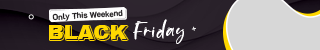
<style>
.page{position:relative;width:320px;height:50px;background:#d7d7d7}
.page>*{position:absolute;margin:0}
.t1{font:8.2px "K2D-SemiBold";color:#1d1a1c}
.t2{font:20.8px "ArchivoBlack-Regular";color:#ffd800}
.t3{font:25.5px "Sand-Beach";letter-spacing:0.055em;color:#ffffff}
</style>
<div class="page">
<p class="t1" style="left:52px;top:9px;width:71px;height:12px;rotate:-3deg">Only This Weekend</p>
<p class="t2" style="left:49px;top:25px;width:78px;height:14px">BLACK</p>
<p class="t3" style="left:133px;top:19px;width:51px;height:25px">Friday</p>
</div>
